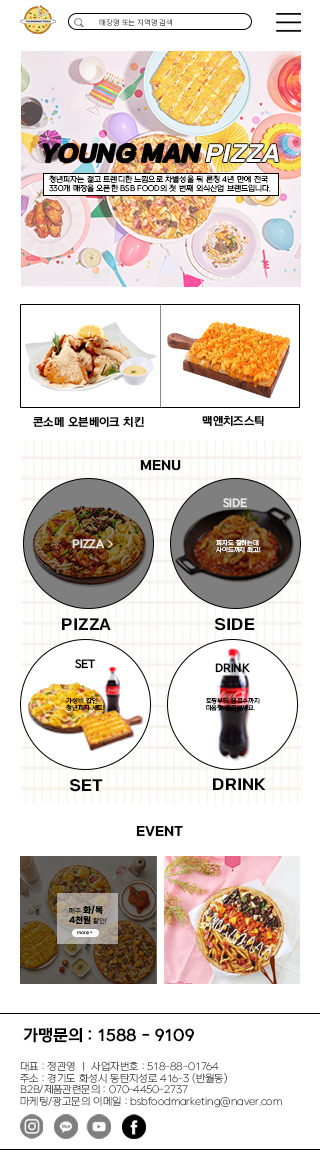
<style>
.page{position:relative;width:320px;height:1174px;background:#ffffff}
.page>*{position:absolute;margin:0}
.t1{font:7px "LeferiPoint-WhiteOblique";color:#737373}
.t2{font:7.5px "NEXONLv1GothicOTFRegular";color:#000000}
.t3{font:11px "NEXONLv1GothicOTFBold";color:#000000}
.t4{font:12.6px "LeferiPoint-Black";color:#000000}
.t5{font:11.1px "NEXONLv1GothicOTFBold";color:#ffffff}
.t6{font:11.1px "NEXONLv1GothicOTFBold";color:#e7e2de}
.t7{font:6.1px "NEXONLv1GothicOTFRegular";color:#ffffff}
.t8{font:15px "LeferiPoint-Black";color:#000000}
.t9{font:11.2px "NEXONLv1GothicOTFBold";color:#000000}
.t10{font:6.1px "NEXONLv1GothicOTFRegular";color:#000000}
.t11{font:8.3px "LeferiPoint-Black";color:#000000}
.t12{font:6.2px "LeferiPoint-WhiteOblique";color:#000000}
.t13{font:4.6px "LeferiPoint-White"}
.t14{font:15.9px "NEXONLv1GothicOTFBold";color:#000000}
.t15{font:9.9px "NEXONLv1GothicOTFLight";color:#585858}
</style>
<div class="page">
<p class="t1" style="left:99px;top:19px;width:73px;height:7px">매장명 또는 지역명 검색</p>
<p class="t2" style="left:49px;top:175px;width:222px;height:17px">청년피자는 젊고 트렌디한 느낌으로 차별성을 둬 론칭 4년 만에 전국 <br>330개 매장을 오픈한 BSB FOOD의 첫 번째 외식산업 브랜드입니다.</p>
<p class="t3" style="left:33px;top:416px;width:111px;height:11px">콘소메 오븐베이크 치킨</p>
<p class="t3" style="left:202px;top:415px;width:62px;height:11px">맥앤치즈스틱</p>
<p class="t4" style="left:140px;top:460px;width:41px;height:11px">MENU</p>
<p class="t5" style="left:223px;top:498px;width:24px;height:10px;opacity:0.8">SIDE</p>
<p class="t6" style="left:72px;top:539px;width:32px;height:10px">PIZZA</p>
<p class="t7" style="left:216px;top:539px;width:45px;height:14px">피자도 잘하는데<br>사이드까지 최고!</p>
<p class="t8" style="left:62px;top:618px;width:49px;height:12px">PIZZA</p>
<p class="t8" style="left:214px;top:618px;width:41px;height:13px">SIDE</p>
<p class="t9" style="left:75px;top:659px;width:21px;height:10px">SET</p>
<p class="t9" style="left:215px;top:663px;width:35px;height:10px">DRINK</p>
<p class="t10" style="left:66px;top:697px;width:39px;height:14px">가성비 갑인<br>청년피자 세트!</p>
<p class="t10" style="left:206px;top:697px;width:54px;height:14px">토핑부터 음료수까지<br>마음껏 골라부세요.</p>
<p class="t8" style="left:69px;top:779px;width:34px;height:13px">SET</p>
<p class="t8" style="left:213px;top:778px;width:53px;height:12px">DRINK</p>
<p class="t4" style="left:136px;top:826px;width:47px;height:11px">EVENT</p>
<p class="t11" style="left:69px;top:905px;width:38px;height:19px;text-align:center"><span class="t12">매주 </span>화/목 <br>4천원<span class="t12"> 할인!</span></p>
<p class="t13" style="left:77px;top:931px;width:16px;height:4px">more +</p>
<p class="t14" style="left:23px;top:1027px;width:171px;height:16px">가맹문의 : 1588 - 9109</p>
<p class="t15" style="left:20px;top:1061px;width:262px;height:47px">대표 : 정관영 ㅣ 사업자번호 : 518-88-01764 <br>주소 : 경기도 화성시 동탄지성로 416-3 (반월동)<br>B2B/제품관련문의 : 070-4450-2737 <br>마케팅/광고문의 이메일 : bsbfoodmarketing@naver.com</p>
</div>
